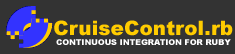
<style>
.page{position:relative;width:235px;height:54px;background:#333333}
.page>*{position:absolute;margin:0}
.t1{font:20px "Arial-Black";color:#ffcc00}
.t2{font:8px "Arial-Black";color:#ffffff}
</style>
<div class="page">
<p class="t1" style="left:54px;top:20px;width:179px;height:16px">CruiseControl.rb</p>
<p class="t2" style="left:56px;top:39px;width:175px;height:6px">CONTINUOUS INTEGRATION FOR RUBY</p>
</div>
